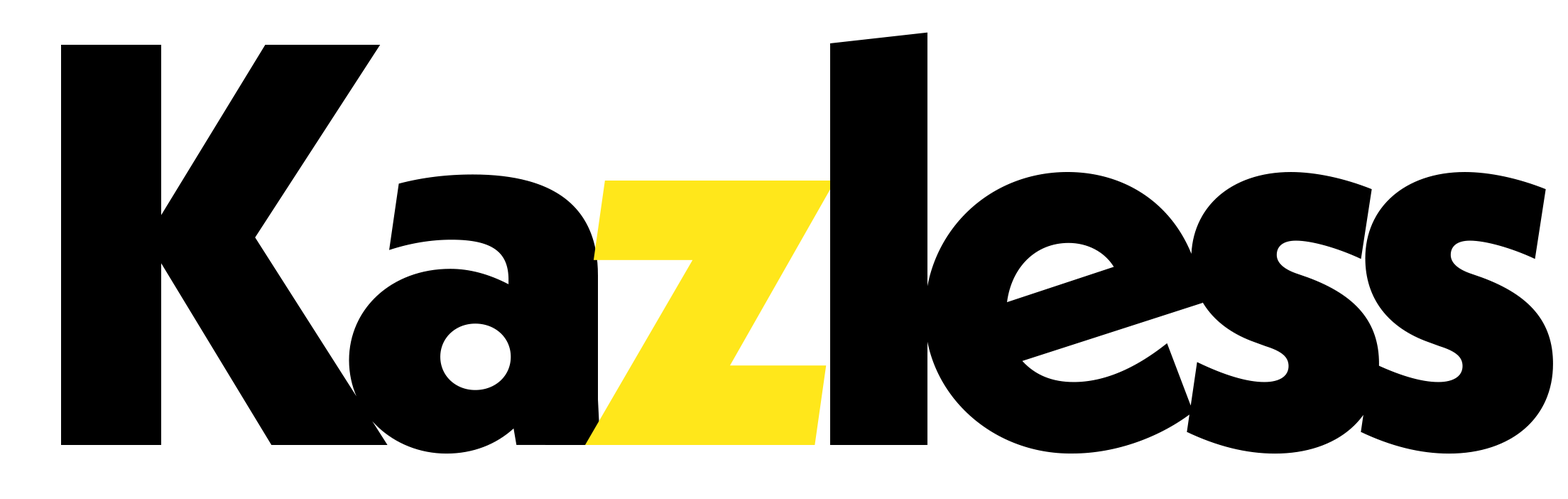
<style>
.page{position:relative;width:1568px;height:499px;background:#ffffff}
.page>*{position:absolute;margin:0}
.t1{font:571.3px "NeueKabel-ExtraBold";letter-spacing:-0.08em;color:#000000}
.t2{font:571.3px "NeueKabel-ExtraBold";letter-spacing:-0.08em;color:#ffe71b}
</style>
<div class="page">
<p class="t1" style="left:61px;top:32px;width:1492px;height:422px">Ka<span class="t2">z</span>less</p>
</div>
